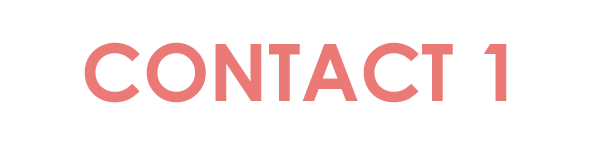
<style>
.page{position:relative;width:591px;height:145px;background:#ffffff}
.page>*{position:absolute;margin:0}
.t1{font:79.2px "CenturyGothic-Bold";color:#eb7a77}
</style>
<div class="page">
<p class="t1" style="left:84px;top:42px;width:423px;height:61px">CONTACT 1</p>
</div>
